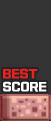
<style>
.page{position:relative;width:51px;height:121px;background:#333333}
.page>*{position:absolute;margin:0}
.t1{font:12px/13.5px "Typo_SsangmunDong_B";color:#ffffff}
.t2{font:12px/13.5px "Typo_SsangmunDong_B";color:#eb2222}
</style>
<div class="page">
<p class="t1" style="left:3px;top:68px;width:44px;height:24px"><span class="t2">BEST<br></span>SCORE</p>
</div>
